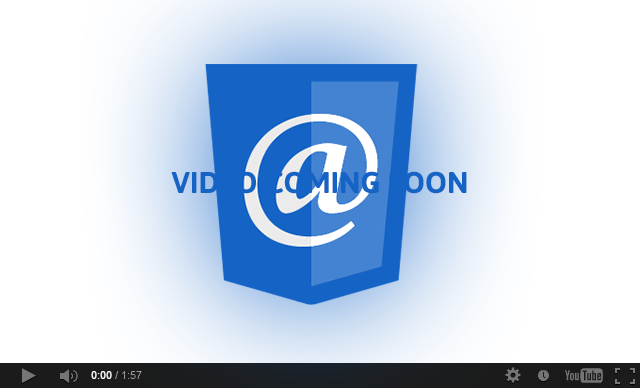
<style>
.page{position:relative;width:640px;height:388px;background:#ffffff}
.page>*{position:absolute;margin:0}
.t1{font:30px "Asap-Bold";color:#1564c5;text-transform:uppercase}
</style>
<div class="page">
<p class="t1" style="left:171px;top:171px;width:296px;height:23px">Video Coming soon</p>
</div>
